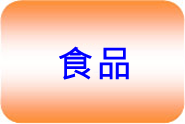
<style>
.page{position:relative;width:185px;height:124px}
.page>*{position:absolute;margin:0}
.t1{font:36px "MicrosoftJhengHeiRegular";letter-spacing:0.05em;color:#0000ff;font-weight:bold}
</style>
<div class="page">
<p class="t1" style="left:59px;top:46px;width:70px;height:34px">食品</p>
</div>
